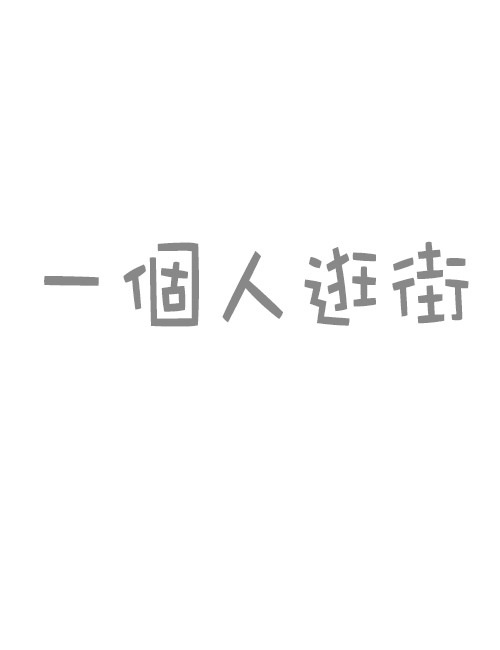
<style>
.page{position:relative;width:500px;height:650px;background:#ffffff}
.page>*{position:absolute;margin:0}
.t1{font:120px "DFWaWaTC-W5";color:#888888;scale:0.74 1}
</style>
<div class="page">
<p class="t1" style="left:44px;top:241px;width:425px;height:86px">一個人逛街</p>
</div>
